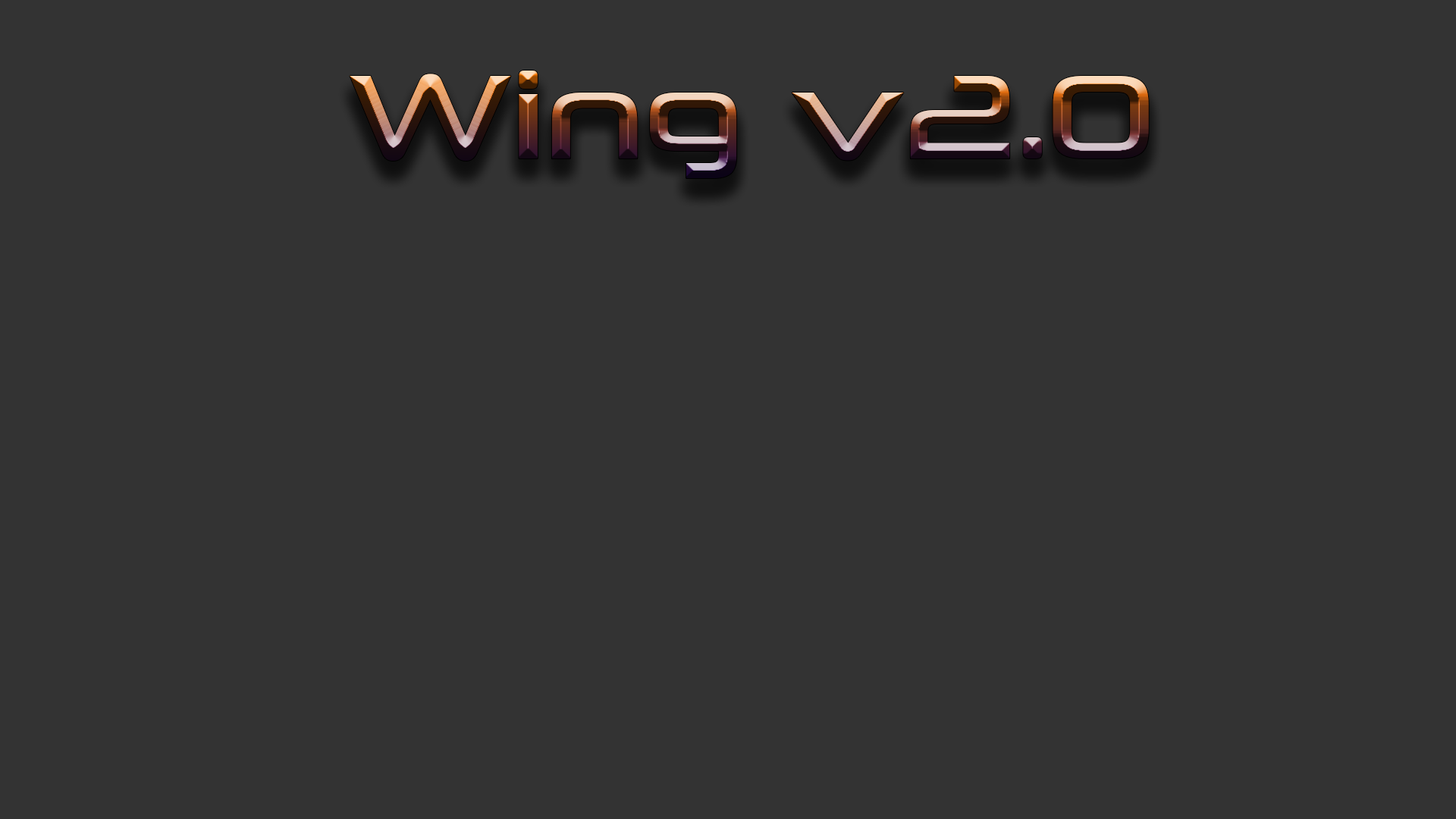
<style>
.page{position:relative;width:1456px;height:819px;background:#333333}
.page>*{position:absolute;margin:0}
.t1{font:121.3px "NeuropoliticalRg-Regular"}
</style>
<div class="page">
<p class="t1" style="left:350px;top:71px;width:799px;height:107px">Wing v2.0</p>
</div>
